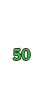
<style>
.page{position:relative;width:50px;height:90px;background:#ffffff}
.page>*{position:absolute;margin:0}
.t1{font:18px "TraditionalArabic";color:#33cd41}
</style>
<div class="page">
<p class="t1" style="left:13px;top:48px;width:17px;height:12px">50</p>
</div>
